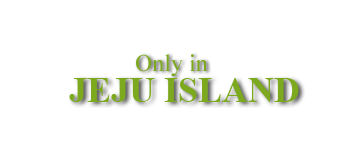
<style>
.page{position:relative;width:350px;height:150px;background:#ffffff}
.page>*{position:absolute;margin:0}
.t1{font:24px "TimesNewRomanPSMT";color:#7ca91e}
.t2{font:36px "TimesNewRomanPS-BoldMT";color:#7ca91e}
</style>
<div class="page">
<p class="t1" style="left:136px;top:54px;width:72px;height:23px">Only in</p>
<p class="t2" style="left:69px;top:78px;width:230px;height:24px">JEJU ISLAND</p>
</div>
